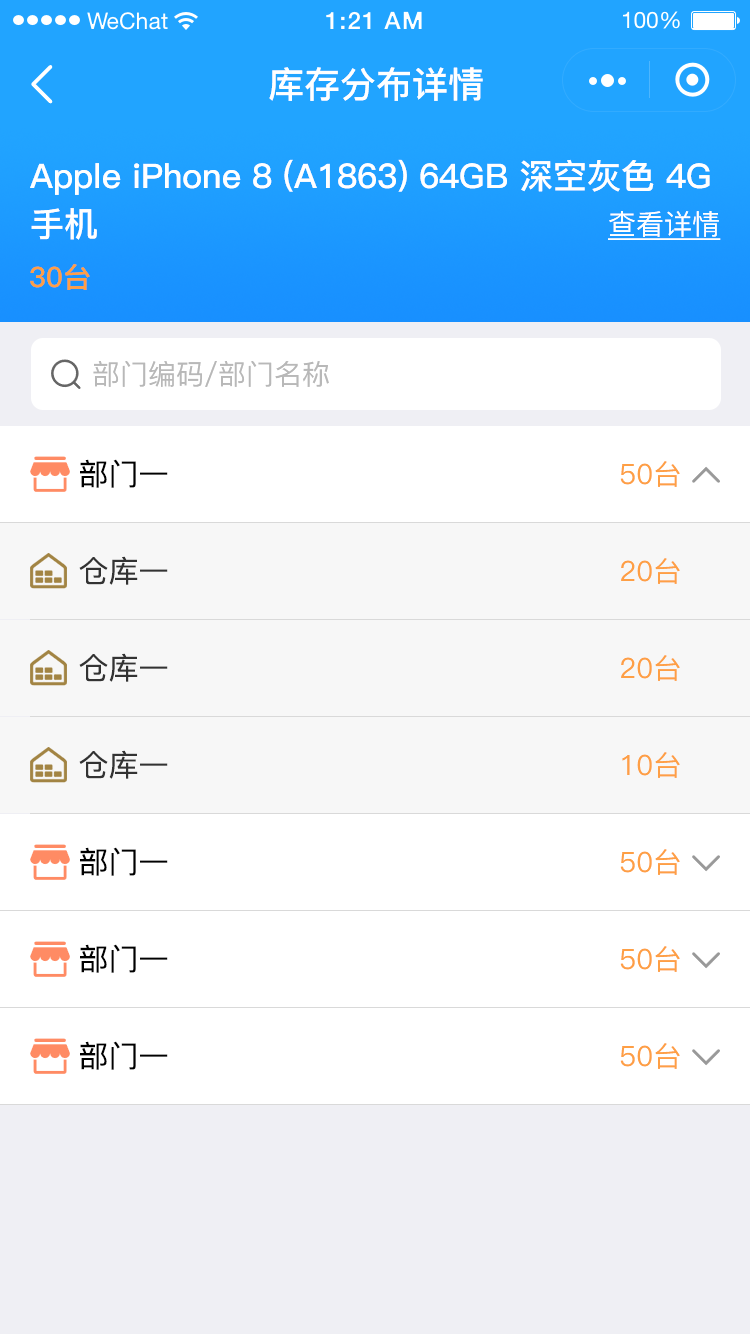
<style>
.page{position:relative;width:750px;height:1334px;background:#ffffff}
.page>*{position:absolute;margin:0}
.t1{font:36px "PingFang-SC-Bold";color:#ffffff}
.t2{font:34px/48px "PingFang-SC-Bold";color:#ffffff}
.t3{font:28px "PingFang-SC-Medium";color:#ffffff;text-decoration:underline}
.t4{font:28px "PingFang-SC-Bold";color:#fe9f45}
.t5{font:28px "PingFang-SC-Medium";color:#b8b8b8}
.t6{font:30px "PingFang-SC-Medium";color:#000000}
.t7{font:28px "PingFang-SC-Medium";color:#fe9f45}
.t8{font:30px "PingFang-SC-Medium";color:#333333}
</style>
<div class="page">
<p class="t1" style="left:269px;top:67px;width:214px;height:34px">库存分布详情</p>
<p class="t2" style="left:30px;top:159px;width:680px;height:81px">Apple iPhone 8 (A1863) 64GB 深空灰色 4G<br>手机</p>
<p class="t3" style="left:608px;top:211px;width:113px;height:29px">查看详情</p>
<p class="t4" style="left:30px;top:264px;width:60px;height:26px">30台</p>
<p class="t5" style="left:93px;top:361px;width:236px;height:26px">部门编码/部门名称</p>
<p class="t6" style="left:80px;top:459px;width:88px;height:29px">部门一</p>
<p class="t7" style="left:620px;top:461px;width:60px;height:26px">50台</p>
<p class="t8" style="left:79px;top:556px;width:89px;height:29px">仓库一</p>
<p class="t7" style="left:621px;top:558px;width:59px;height:26px">20台</p>
<p class="t8" style="left:79px;top:653px;width:89px;height:29px">仓库一</p>
<p class="t7" style="left:621px;top:655px;width:59px;height:26px">20台</p>
<p class="t8" style="left:79px;top:750px;width:89px;height:29px">仓库一</p>
<p class="t7" style="left:622px;top:752px;width:58px;height:26px">10台</p>
<p class="t6" style="left:80px;top:847px;width:88px;height:29px">部门一</p>
<p class="t7" style="left:620px;top:849px;width:60px;height:26px">50台</p>
<p class="t6" style="left:80px;top:944px;width:88px;height:29px">部门一</p>
<p class="t7" style="left:620px;top:946px;width:60px;height:26px">50台</p>
<p class="t6" style="left:80px;top:1041px;width:88px;height:29px">部门一</p>
<p class="t7" style="left:620px;top:1043px;width:60px;height:26px">50台</p>
</div>
